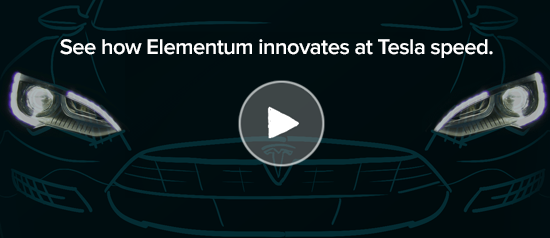
<style>
.page{position:relative;width:550px;height:238px}
.page>*{position:absolute;margin:0}
.t1{font:22px "ProximaNova-Semibold";letter-spacing:-0.022em;color:#ffffff}
</style>
<div class="page">
<p class="t1" style="left:60px;top:39px;width:433px;height:19px">See how Elementum innovates at Tesla speed.</p>
</div>
